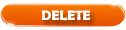
<style>
.page{position:relative;width:126px;height:30px;background:#ffffff}
.page>*{position:absolute;margin:0}
.t1{font:14px "BerlinSansFBDemi-Bold";color:#ffffff;text-transform:uppercase}
</style>
<div class="page">
<p class="t1" style="left:42px;top:10px;width:49px;height:11px">delete</p>
</div>
